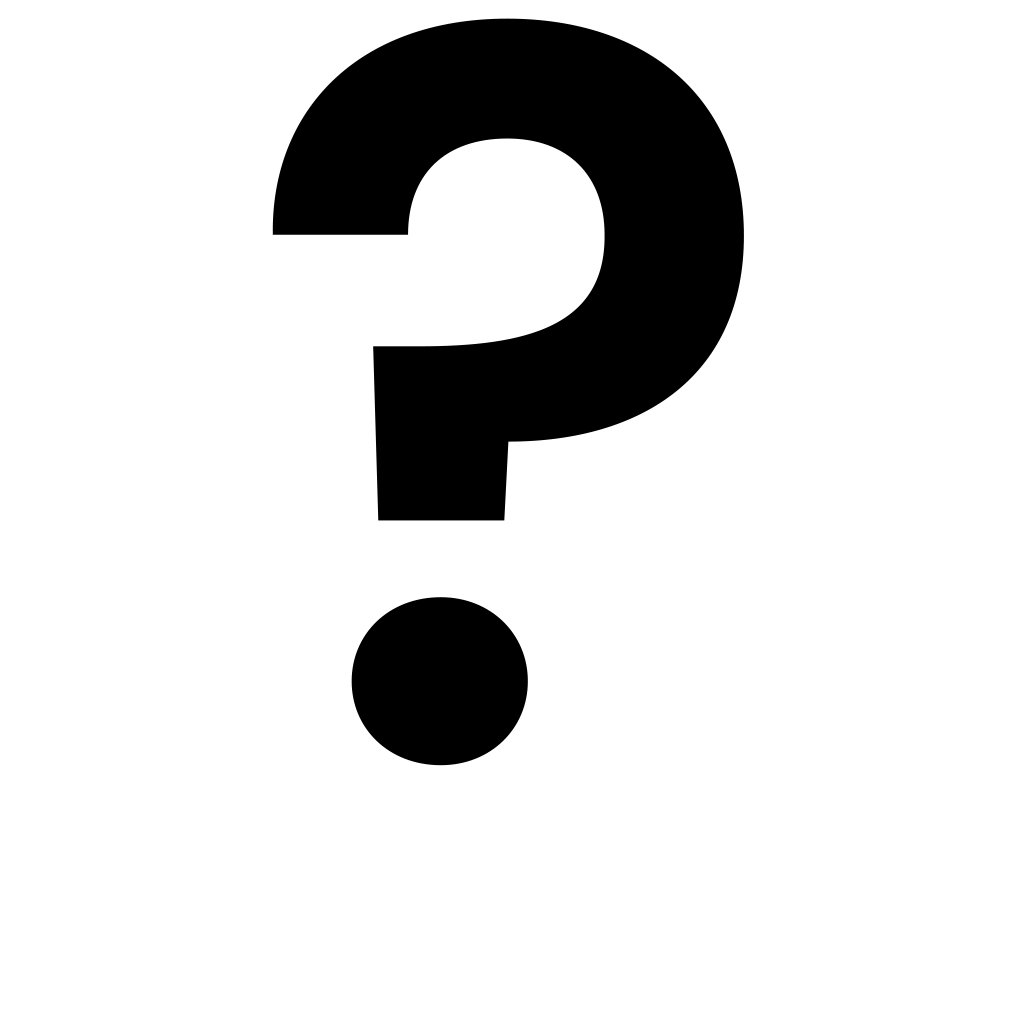
<style>
.page{position:relative;width:1024px;height:1024px;background:#ffffff}
.page>*{position:absolute;margin:0}
.t1{font:1024px "Poppins-SemiBold";color:#000000}
</style>
<div class="page">
<p class="t1" style="left:272px;top:18px;width:472px;height:748px">?</p>
</div>
